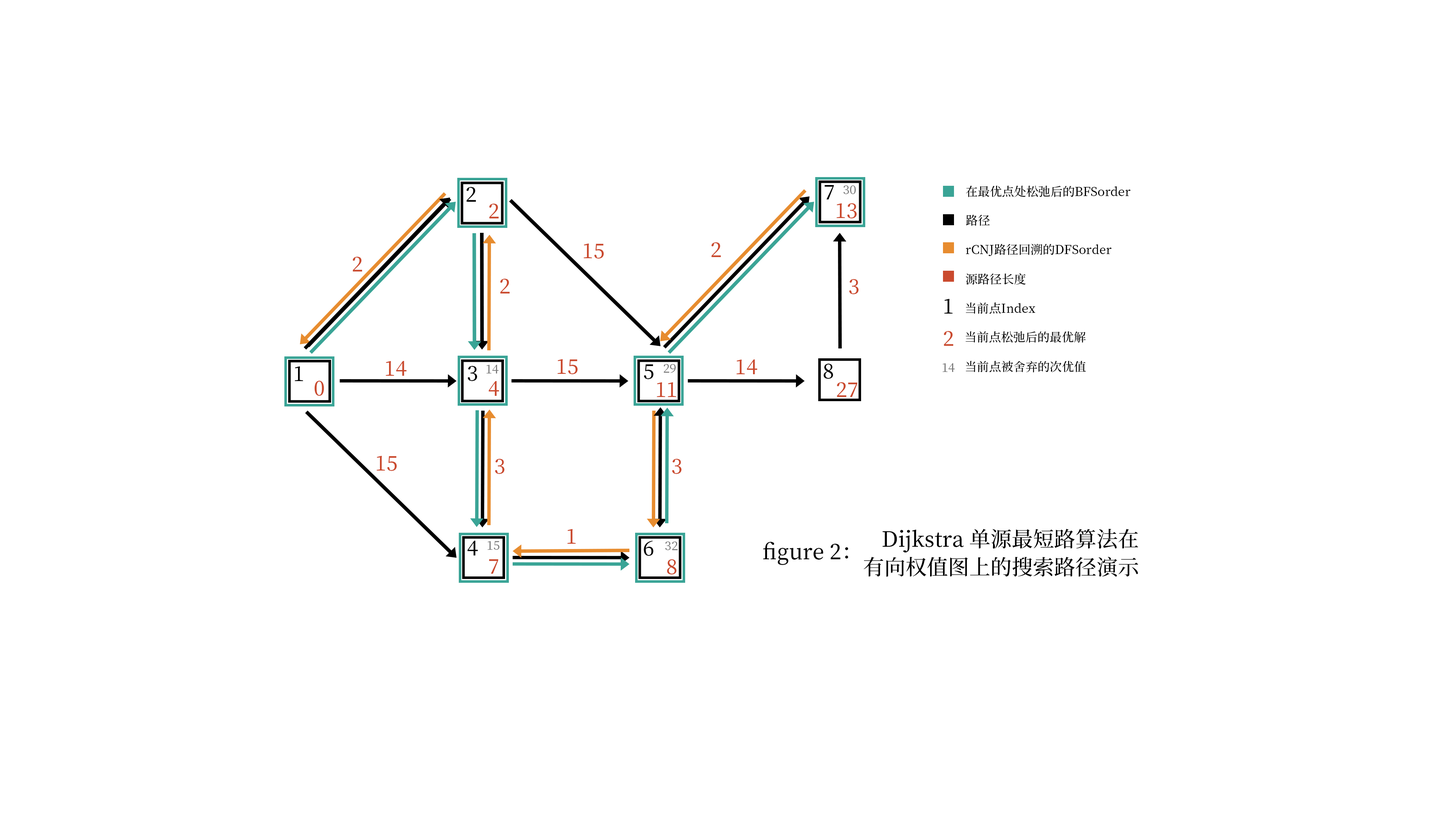
<style>
.page{position:relative;width:1456px;height:819px;background:#ffffff}
.page>*{position:absolute;margin:0}
.t1{font:20.5px "SourceHanSerifCN-Medium";color:#000000}
.t2{font:12.1px "SourceHanSerifCN-Medium";color:#7b7b7b}
.t3{font:12.1px "SourceHanSerifCN-Medium";color:#000000}
.t4{font:20.5px "SourceHanSerifCN-Medium";color:#ca4a2e}
.t5{font:21.2px/28.1px "SourceHanSerifCN-Medium";color:#000000}
.t6{font:21.2px "SourceHanSerifCN-Medium";color:#000000}
</style>
<div class="page">
<p class="t1" style="left:825px;top:185px;width:9px;height:14px">7</p>
<p class="t2" style="left:843px;top:185px;width:13px;height:9px">30</p>
<p class="t3" style="left:966px;top:185px;width:165px;height:12px">在最优点处松弛后的BFSorder</p>
<p class="t1" style="left:466px;top:187px;width:10px;height:15px">2</p>
<p class="t4" style="left:489px;top:204px;width:10px;height:14px">2</p>
<p class="t4" style="left:836px;top:203px;width:21px;height:15px">13</p>
<p class="t3" style="left:966px;top:215px;width:24px;height:11px">路径</p>
<p class="t4" style="left:584px;top:243px;width:20px;height:16px">15</p>
<p class="t4" style="left:711px;top:242px;width:10px;height:15px">2</p>
<p class="t3" style="left:966px;top:244px;width:146px;height:12px">rCNJ路径回溯的DFSorder</p>
<p class="t4" style="left:353px;top:257px;width:9px;height:14px">2</p>
<p class="t4" style="left:500px;top:279px;width:10px;height:14px">2</p>
<p class="t4" style="left:849px;top:279px;width:10px;height:15px">3</p>
<p class="t3" style="left:966px;top:273px;width:60px;height:12px">源路径长度</p>
<p class="t1" style="left:944px;top:299px;width:9px;height:15px">1</p>
<p class="t3" style="left:966px;top:302px;width:69px;height:12px">当前点Index</p>
<p class="t4" style="left:944px;top:331px;width:9px;height:15px">2</p>
<p class="t3" style="left:965px;top:331px;width:121px;height:12px">当前点松弛后的最优解</p>
<p class="t4" style="left:386px;top:361px;width:20px;height:15px">14</p>
<p class="t1" style="left:468px;top:366px;width:9px;height:15px">3</p>
<p class="t2" style="left:486px;top:365px;width:13px;height:8px">14</p>
<p class="t4" style="left:557px;top:359px;width:21px;height:15px">15</p>
<p class="t1" style="left:644px;top:364px;width:10px;height:15px">5</p>
<p class="t2" style="left:664px;top:364px;width:12px;height:9px">29</p>
<p class="t4" style="left:736px;top:359px;width:21px;height:15px">14</p>
<p class="t1" style="left:824px;top:364px;width:9px;height:15px">8</p>
<p class="t2" style="left:943px;top:363px;width:12px;height:9px">14</p>
<p class="t3" style="left:966px;top:361px;width:120px;height:11px">当前点被舍弃的次优值</p>
<p class="t1" style="left:295px;top:366px;width:8px;height:15px">1</p>
<p class="t4" style="left:314px;top:381px;width:10px;height:15px">0</p>
<p class="t4" style="left:489px;top:381px;width:10px;height:15px">4</p>
<p class="t4" style="left:657px;top:382px;width:19px;height:15px">11</p>
<p class="t4" style="left:837px;top:382px;width:20px;height:15px">27</p>
<p class="t4" style="left:377px;top:456px;width:20px;height:15px">15</p>
<p class="t4" style="left:495px;top:459px;width:10px;height:15px">3</p>
<p class="t4" style="left:672px;top:459px;width:10px;height:15px">3</p>
<p class="t4" style="left:567px;top:529px;width:9px;height:15px">1</p>
<p class="t5" style="left:864px;top:529px;width:274px;height:48px;text-align:right">Dijkstra 单源最短路算法在<br>有向权值图上的搜索路径演示</p>
<p class="t1" style="left:468px;top:541px;width:10px;height:14px">4</p>
<p class="t2" style="left:488px;top:541px;width:11px;height:9px">15</p>
<p class="t1" style="left:644px;top:541px;width:9px;height:15px">6</p>
<p class="t2" style="left:665px;top:541px;width:13px;height:9px">32</p>
<p class="t6" style="left:763px;top:542px;width:85px;height:23px">figure 2：</p>
<p class="t4" style="left:489px;top:559px;width:9px;height:15px">7</p>
<p class="t4" style="left:667px;top:559px;width:9px;height:15px">8</p>
</div>
